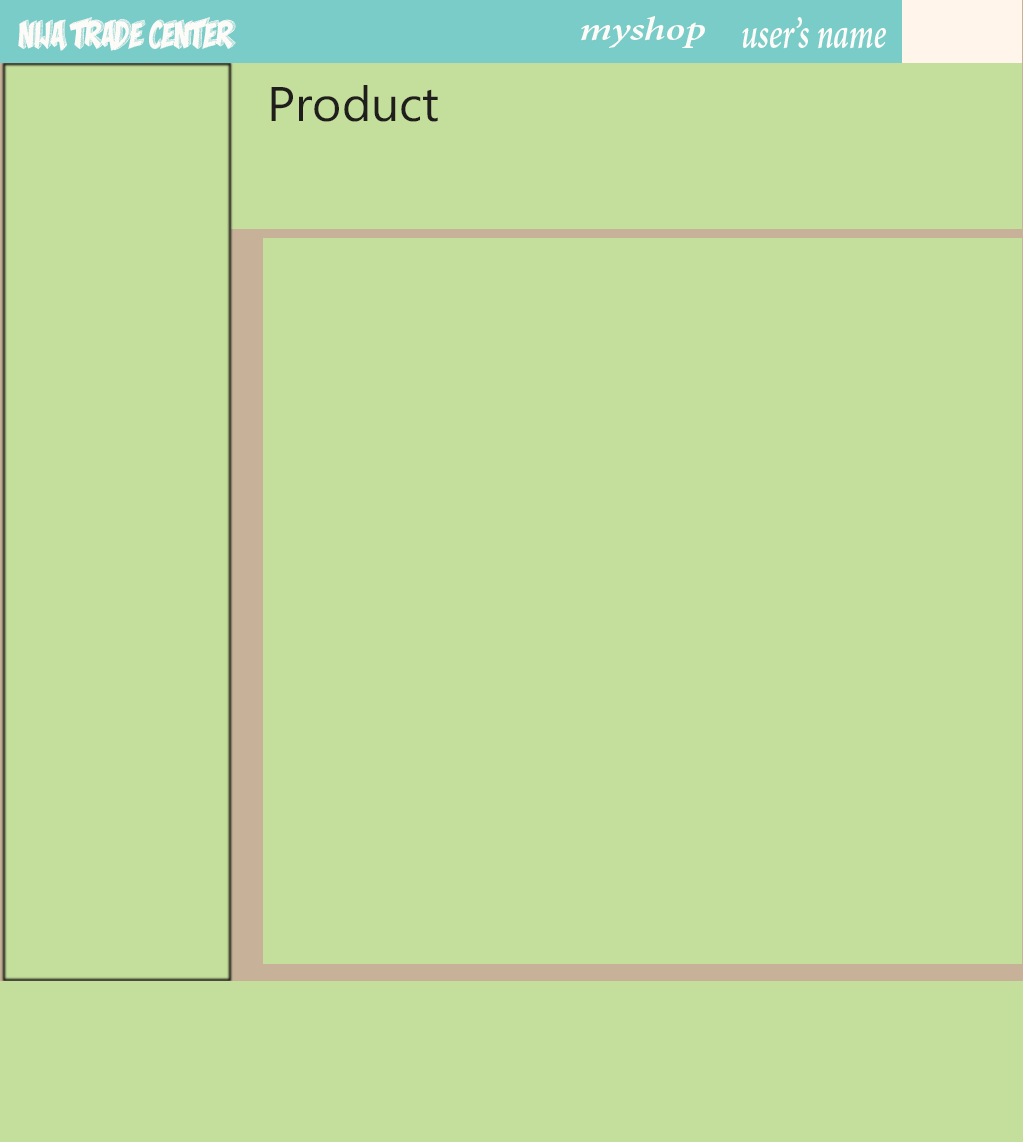
<style>
.page{position:relative;width:1024px;height:1142px;background:#c4df9b}
.page>*{position:absolute;margin:0}
.t1{font:35px "MonaShark";color:#fdfbf8;scale:0.84 1}
.t2{font:33.5px "MinionPro-SemiboldIt";color:#fdfbf8;scale:1.24 1}
.t3{font:43.3px "MinionPro-SemiboldIt";color:#fdfbf8;scale:0.72 1}
.t4{font:48.6px "MicrosoftPhagsPa";color:#201e1b}
</style>
<div class="page">
<p class="t1" style="left:18px;top:17px;width:218px;height:34px">Nija Trade Center</p>
<p class="t2" style="left:581px;top:16px;width:124px;height:32px">myshop</p>
<p class="t3" style="left:742px;top:17px;width:144px;height:32px">user’s name</p>
<p class="t4" style="left:271px;top:85px;width:167px;height:37px">Product</p>
</div>
